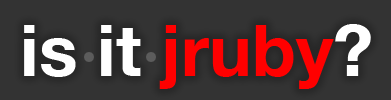
<style>
.page{position:relative;width:391px;height:100px;background:#333333}
.page>*{position:absolute;margin:0}
.t1{font:72px "HelveticaNeue-Bold";color:#ffffff}
.t2{font:72px "HelveticaNeue-Bold";color:#ff0000}
</style>
<div class="page">
<p class="t1" style="left:24px;top:24px;width:347px;height:65px">is it <span class="t2">jruby</span>?</p>
</div>
